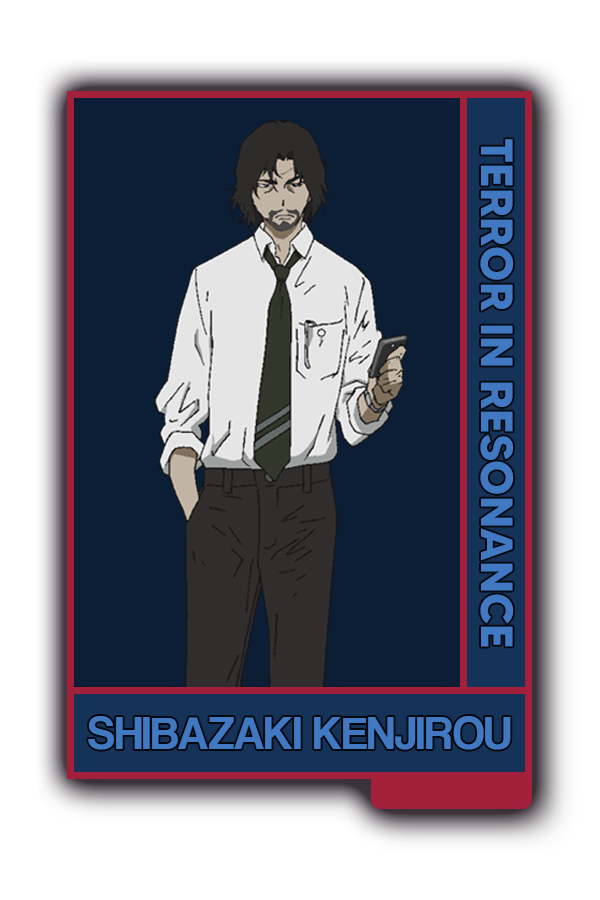
<style>
.page{position:relative;width:600px;height:900px;background:#0c1e35}
.page>*{position:absolute;margin:0}
.t1{font:45.2px "MADETOMMY-Bold";color:#4079c2}
.t2{font:47.3px "CoolveticaRg-Regular";color:#4079c2}
</style>
<div class="page">
<p class="t1" style="left:480px;top:139px;width:34px;height:508px;rotate:90deg">TERROR IN RESONANCE</p>
<p class="t2" style="left:88px;top:716px;width:423px;height:34px">SHIBAZAKI KENJIROU</p>
</div>
